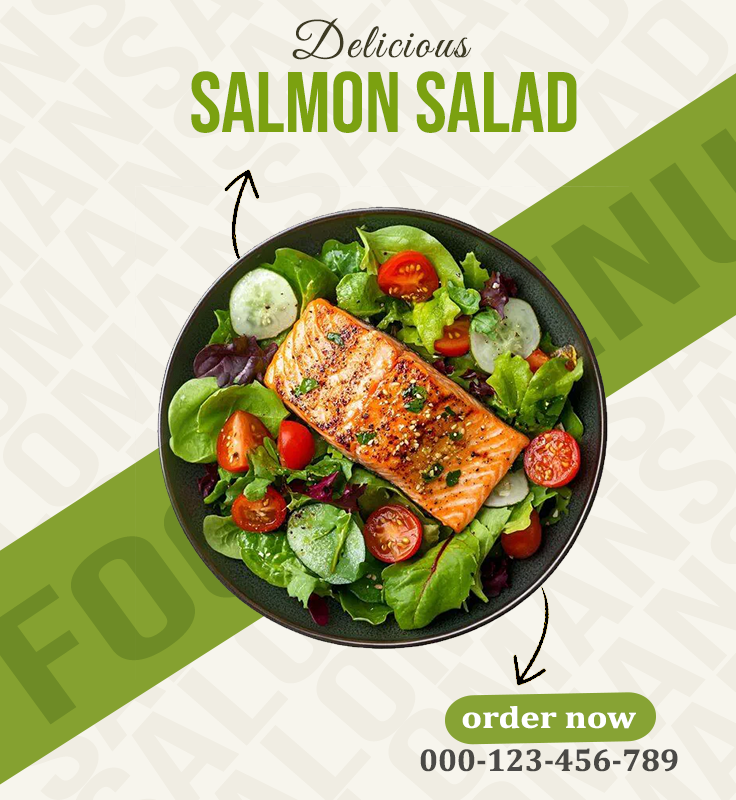
<style>
.page{position:relative;width:736px;height:800px;background:#f0ede3}
.page>*{position:absolute;margin:0}
.t1{font:49.3px "GreatVibes-Regular";letter-spacing:0.06em;color:#3d3a23}
.t2{font:85.4px "BebasNeue-Regular";color:#7ba110}
.t3{font:31px "Cambria-Bold";color:#ffffff;scale:1.18 1}
.t4{font:32px "Cambria-Bold";color:#494844}
</style>
<div class="page">
<p class="t1" style="left:292px;top:18px;width:180px;height:42px">Delicious</p>
<p class="t2" style="left:191px;top:71px;width:386px;height:62px">salmon salad</p>
<p class="t3" style="left:462px;top:706px;width:174px;height:23px">order now</p>
<p class="t4" style="left:420px;top:748px;width:258px;height:24px">000-123-456-789</p>
</div>
